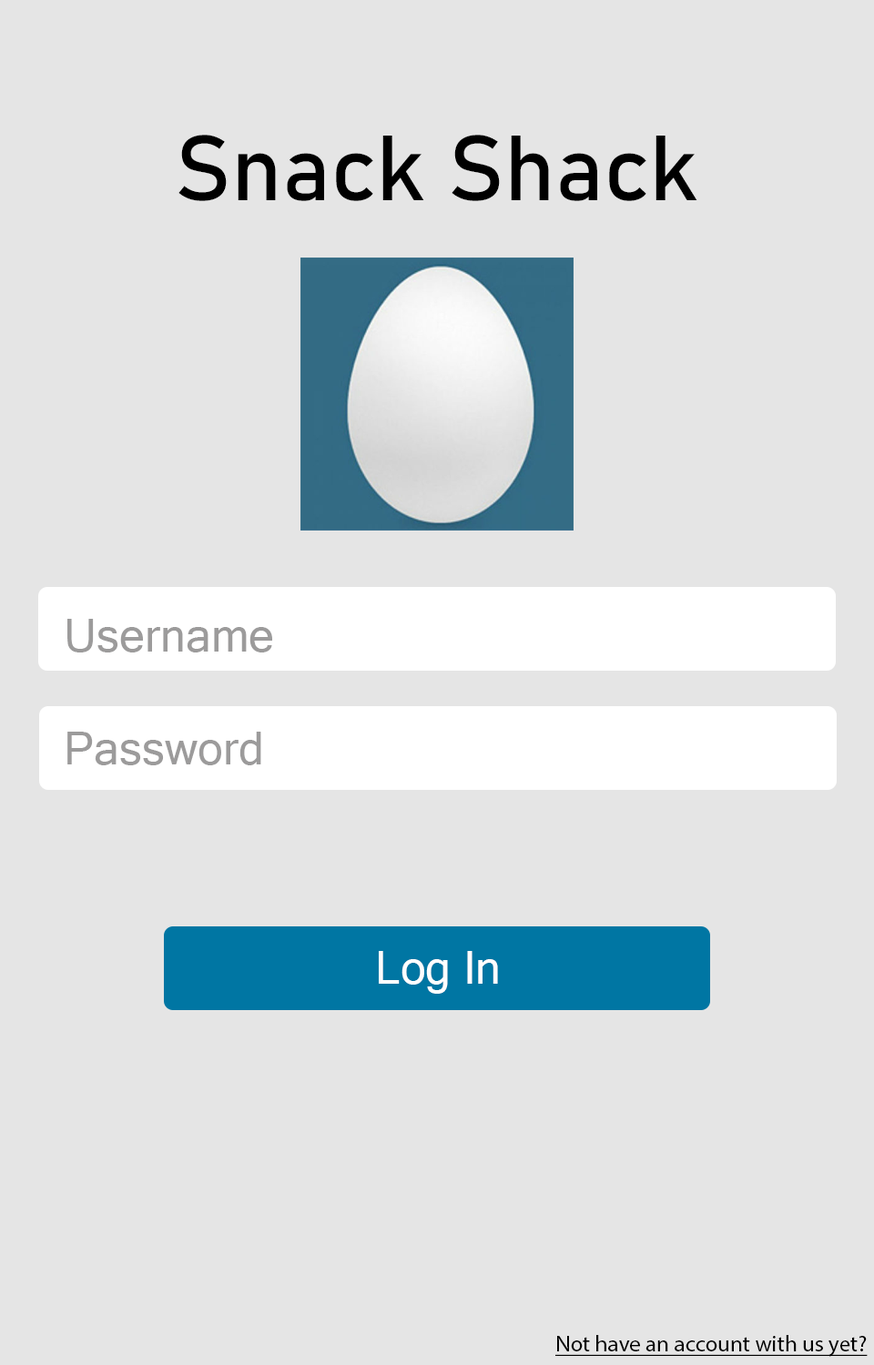
<style>
.page{position:relative;width:874px;height:1365px;background:#e5e5e5}
.page>*{position:absolute;margin:0}
.t1{font:91px "Bahnschrift";color:#000000}
.t2{font:45.5px "MicrosoftSansSerif";color:#9c9b9b}
.t3{font:45.5px "MicrosoftSansSerif";color:#fffefe}
.t4{font:22.7px "MyriadPro-Regular";color:#000000;text-decoration:underline}
</style>
<div class="page">
<p class="t1" style="left:178px;top:135px;width:519px;height:66px">Snack Shack</p>
<p class="t2" style="left:67px;top:619px;width:205px;height:33px">Username</p>
<p class="t2" style="left:67px;top:732px;width:194px;height:33px">Password</p>
<p class="t3" style="left:379px;top:951px;width:119px;height:43px">Log In</p>
<p class="t4" style="left:555px;top:1335px;width:312px;height:22px">Not have an account with us yet?</p>
</div>
